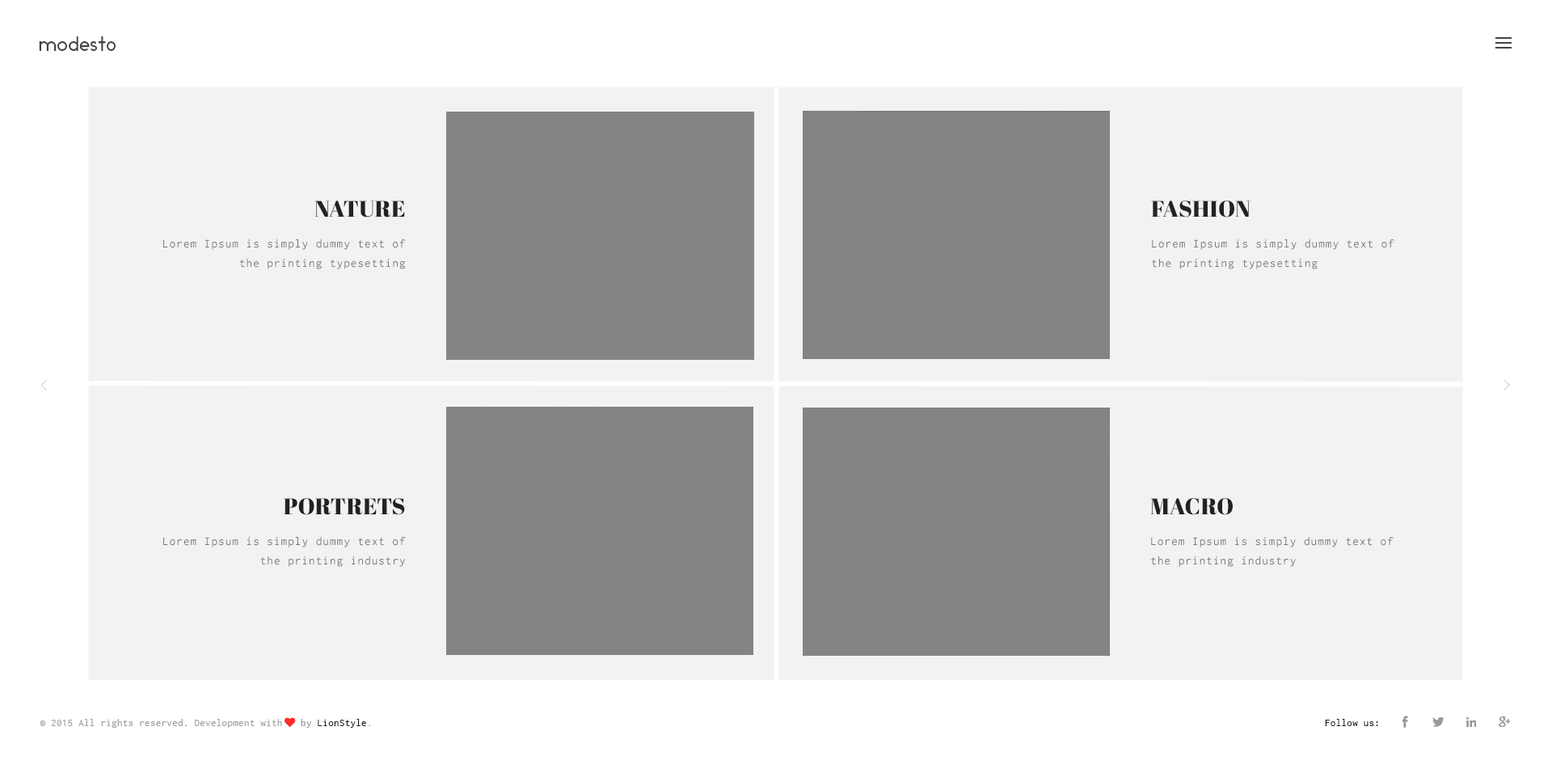
<style>
.page{position:relative;width:1552px;height:769px;background:#f2f2f2}
.page>*{position:absolute;margin:0}
.t1{font:19.4px "Ikaros";letter-spacing:0.025em;color:#444444}
.t2{font:22.6px "AbrilFatface-Regular";letter-spacing:0.01em;color:#222222;text-transform:uppercase}
.t3{font:12.1px/19.4px "Inconsolata";letter-spacing:0.075em;color:#787878}
.t4{font:35.6px "DecorCyrillic";scale:0.6 1}
.t5{font:35.6px "DecorCyrillic";letter-spacing:-0.05em;scale:0.59 1}
.t6{font:10.5px "Inconsolata";letter-spacing:0.025em;color:#a1a1a1}
.t7{font:10.5px "FontAwesome";letter-spacing:0.025em;color:#fe2b2b}
.t8{font:10.5px "Inconsolata";letter-spacing:0.025em;color:#989898}
.t9{font:10.5px "Inconsolata";letter-spacing:0.025em;color:#222222}
.t10{font:10.5px "Inconsolata";letter-spacing:0.025em;color:#b5b5b5}
</style>
<div class="page">
<p class="t1" style="left:39px;top:36px;width:77px;height:15px">modesto</p>
<p class="t2" style="left:314px;top:200px;width:91px;height:17px">nature</p>
<p class="t2" style="left:1151px;top:200px;width:99px;height:17px">Fashion</p>
<p class="t3" style="left:163px;top:239px;width:243px;height:30px;text-align:right">Lorem Ipsum is simply dummy text of the printing typesetting</p>
<p class="t3" style="left:1152px;top:239px;width:242px;height:30px">Lorem Ipsum is simply dummy text of the printing typesetting</p>
<p class="t4" style="left:41px;top:379px;width:6px;height:11px">&lt;</p>
<p class="t5" style="left:1503px;top:379px;width:7px;height:11px">&gt;</p>
<p class="t2" style="left:284px;top:498px;width:121px;height:17px">portrets</p>
<p class="t2" style="left:1150px;top:498px;width:82px;height:17px">macro</p>
<p class="t3" style="left:163px;top:537px;width:243px;height:29px;text-align:right">Lorem Ipsum is simply dummy text of the printing industry</p>
<p class="t3" style="left:1151px;top:537px;width:242px;height:29px">Lorem Ipsum is simply dummy text of the printing industry</p>
<p class="t6" style="left:40px;top:717px;width:330px;height:10px">© 2015 All rights reserved. Development with <span class="t7">♥ </span><span class="t8">by </span><span class="t9">LionStyle</span><span class="t10">.</span></p>
<p class="t9" style="left:1325px;top:718px;width:53px;height:8px">Follow us:</p>
</div>
